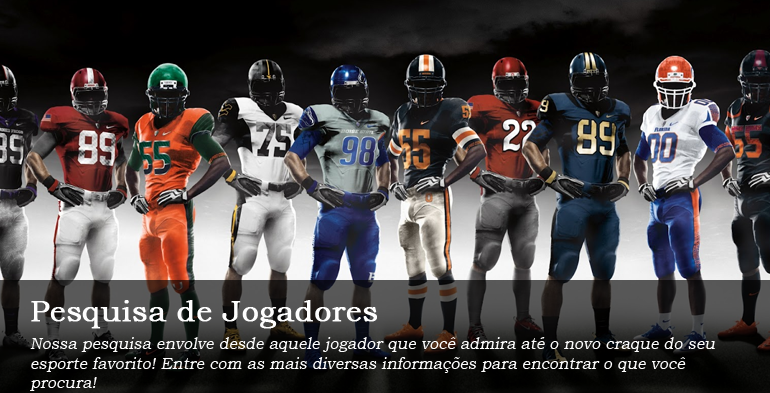
<style>
.page{position:relative;width:770px;height:393px}
.page>*{position:absolute;margin:0}
.t1{font:30px "BookmanOldStyle";color:#fefefe;font-weight:bold}
.t2{font:16px "BookmanOldStyle";color:#fefefe;font-style:italic}
</style>
<div class="page">
<p class="t1" style="left:31px;top:300px;width:346px;height:29px">Pesquisa de Jogadores</p>
<p class="t2" style="left:30px;top:337px;width:685px;height:54px">Nossa pesquisa envolve desde aquele jogador que você admira até o novo craque do seu esporte favorito! Entre com as mais diversas informações para encontrar o que você procura!</p>
</div>
